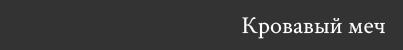
<style>
.page{position:relative;width:403px;height:50px;background:#333333}
.page>*{position:absolute;margin:0}
.t1{font:24px "CrimsonText-Regular";color:#ffffff}
</style>
<div class="page">
<p class="t1" style="left:242px;top:17px;width:143px;height:22px">Кровавый меч</p>
</div>
